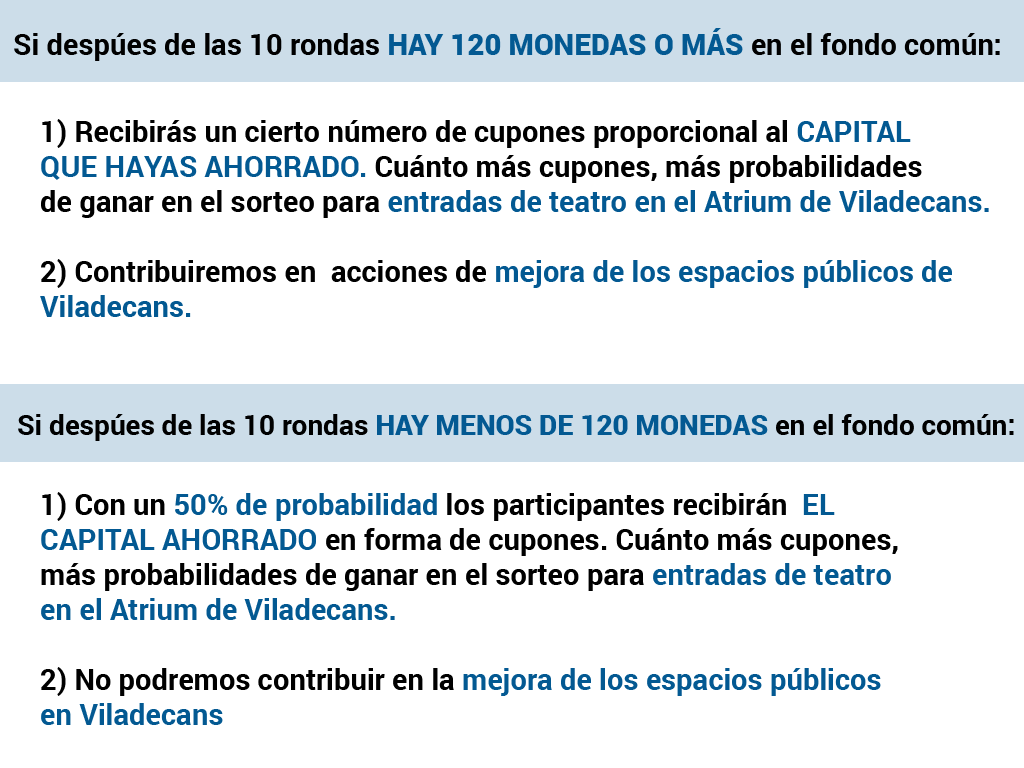
<style>
.page{position:relative;width:1024px;height:768px;background:#ffffff}
.page>*{position:absolute;margin:0}
.t1{font:29.2px "Roboto-Bold";color:#000000}
.t2{font:29.2px "Roboto-Black";color:#035992}
.t3{font:29.2px "Roboto-Bold";color:#035992}
.t4{font:27.9px "Roboto-Bold";color:#000000}
.t5{font:27.9px "Roboto-Black";color:#035992}
</style>
<div class="page">
<p class="t1" style="left:14px;top:28px;width:986px;height:33px">Si despúes de las 10 rondas <span class="t2">HAY 120 MONEDAS O MÁS </span>en el fondo común:</p>
<p class="t1" style="left:40px;top:119px;width:949px;height:198px">1) Recibirás un cierto número de cupones proporcional al <span class="t3">CAPITAL <br>QUE HAYAS AHORRADO.</span> Cuánto más cupones, más probabilidades <br>de ganar en el sorteo para <span class="t3">entradas de teatro en el Atrium de Viladecans.<br></span><br>2) Contribuiremos en  acciones de <span class="t3">mejora de los espacios públicos de <br>Viladecans.</span></p>
<p class="t4" style="left:18px;top:414px;width:996px;height:27px">Si despúes de las 10 rondas <span class="t5">HAY MENOS DE 120 MONEDAS </span>en el fondo común:</p>
<p class="t1" style="left:41px;top:492px;width:857px;height:233px">1) Con un <span class="t3">50% de probabilidad</span> los participantes recibirán  <span class="t3">EL <br>CAPITAL AHORRADO</span> en forma de cupones. Cuánto más cupones, <br>más probabilidades de ganar en el sorteo para <span class="t3">entradas de teatro <br>en el Atrium de Viladecans.<br></span><br>2) No podremos contribuir en la <span class="t3">mejora de los espacios públicos <br>en Viladecans</span></p>
</div>
